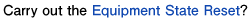
<style>
.page{position:relative;width:250px;height:19px;background:#ffffff}
.page>*{position:absolute;margin:0}
.t1{font:14px "FutoGoB101Pr5-Bold";color:#0f47b0}
.t2{font:14px "FutoGoB101Pr5-Bold";color:#000000}
</style>
<div class="page">
<p class="t1" style="left:3px;top:4px;width:245px;height:14px"><span class="t2">Carry out the </span>Equipment State Reset<span class="t2">?</span></p>
</div>
